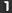
<style>
.page{position:relative;width:12px;height:13px}
.page>*{position:absolute;margin:0}
.t1{font:13.9px "K2D-ExtraBold";color:#ffffff}
</style>
<div class="page">
<p class="t1" style="left:4px;top:1px;width:5px;height:10px">1</p>
</div>
